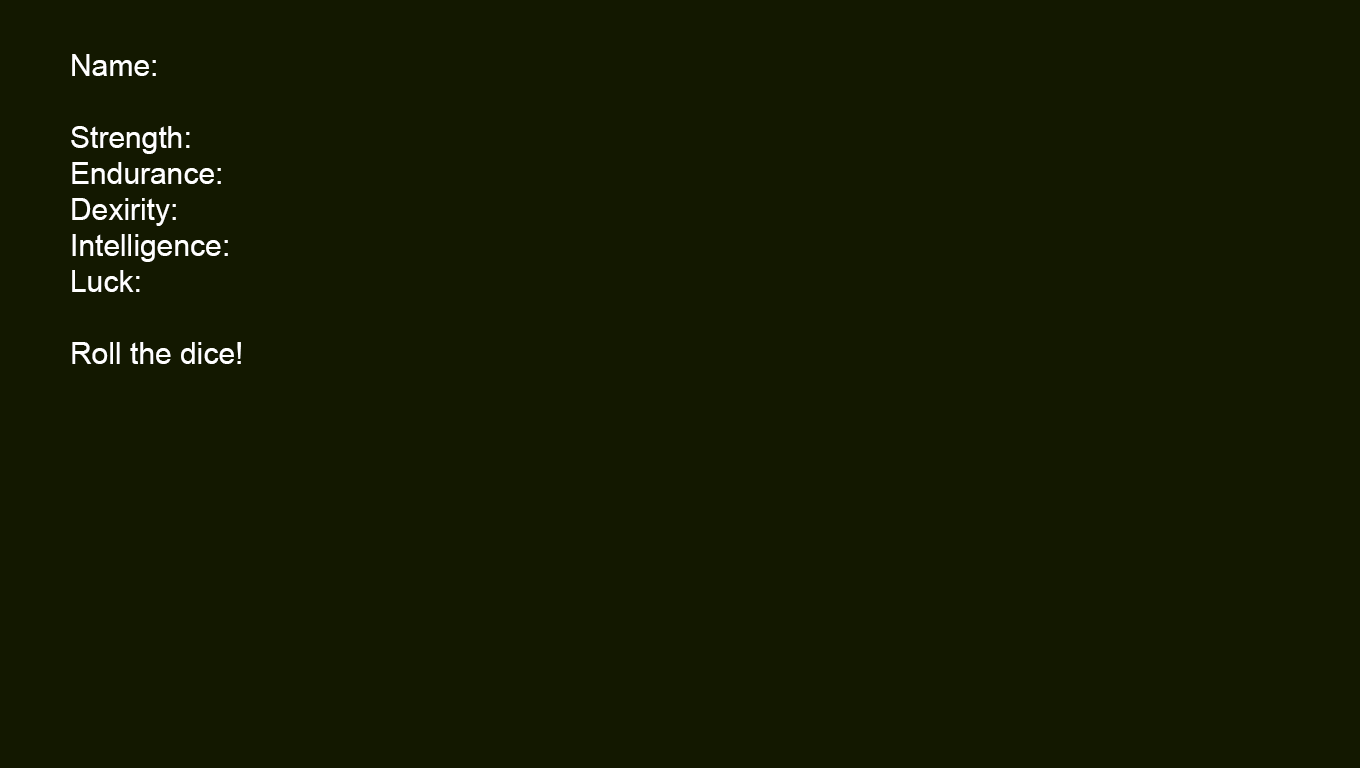
<style>
.page{position:relative;width:1360px;height:768px;background:#131800}
.page>*{position:absolute;margin:0}
.t1{font:30px "ArialMT";color:#ffffff}
</style>
<div class="page">
<p class="t1" style="left:71px;top:54px;width:170px;height:310px">Name:<br><br>Strength:<br>Endurance:<br>Dexirity:<br>Intelligence:<br>Luck:<br><br>Roll the dice!</p>
</div>
